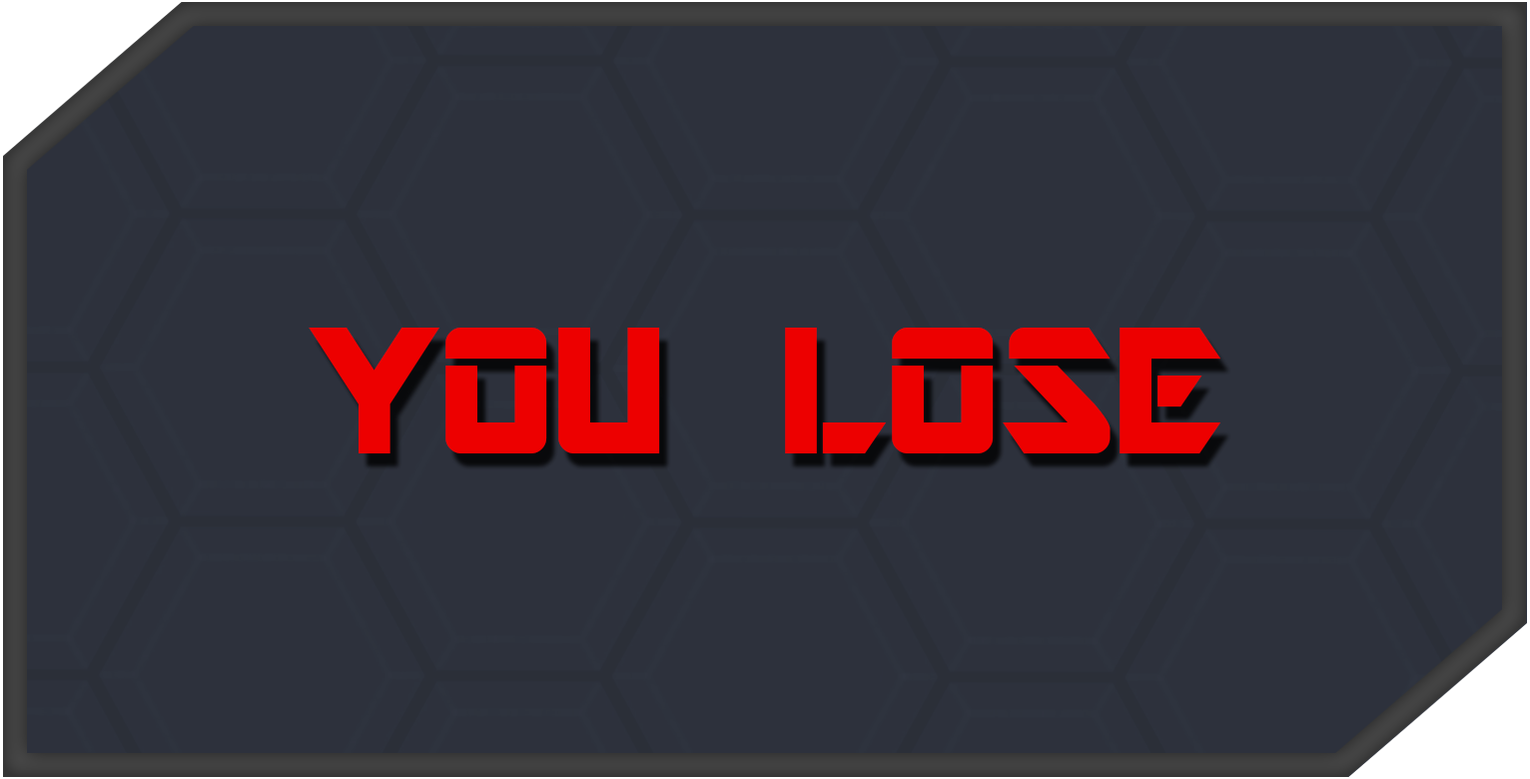
<style>
.page{position:relative;width:1530px;height:779px;background:#2d313c}
.page>*{position:absolute;margin:0}
.t1{font:199.8px "ARDESTINE";color:#ed0000}
</style>
<div class="page">
<p class="t1" style="left:309px;top:328px;width:913px;height:126px">YOU LOSE</p>
</div>
